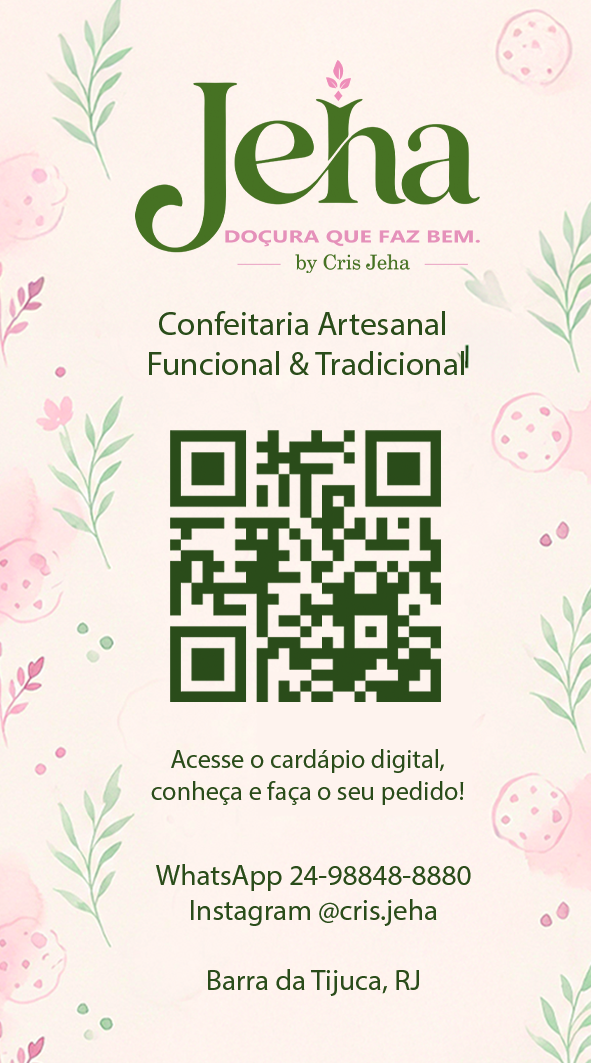
<style>
.page{position:relative;width:591px;height:1063px}
.page>*{position:absolute;margin:0}
.t1{font:33.3px "MyriadPro-Regular";color:#2a4c1a}
.t2{font:26.2px "MyriadPro-Regular";color:#2a4c1a}
.t3{font:29.2px "MyriadPro-Regular";color:#2a4c1a}
</style>
<div class="page">
<p class="t1" style="left:149px;top:311px;width:315px;height:64px;text-align:center">Confeitaria Artesanal<br> Funcional &amp; Tradicional</p>
<p class="t2" style="left:151px;top:749px;width:313px;height:56px;text-align:center">Acesse o cardápio digital,<br>conheça e faça o seu pedido!</p>
<p class="t3" style="left:156px;top:864px;width:315px;height:132px;text-align:center">WhatsApp 24-98848-8880<br>Instagram @cris.jeha<br><br>Barra da Tijuca, RJ</p>
</div>
